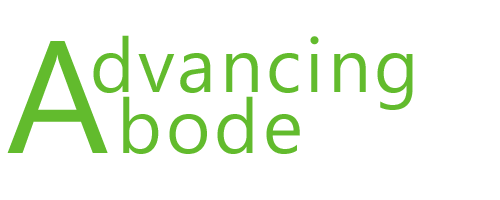
<style>
.page{position:relative;width:500px;height:200px;background:#ffffff}
.page>*{position:absolute;margin:0}
.t1{font:160px "SegoeUI";letter-spacing:0.05em;color:#62bb2d}
.t2{font:76px "SegoeUI";letter-spacing:0.05em;color:#62bb2d}
</style>
<div class="page">
<p class="t1" style="left:7px;top:41px;width:101px;height:112px">A</p>
<p class="t2" style="left:93px;top:35px;width:320px;height:75px">dvancing</p>
<p class="t2" style="left:123px;top:96px;width:177px;height:58px">bode</p>
</div>
